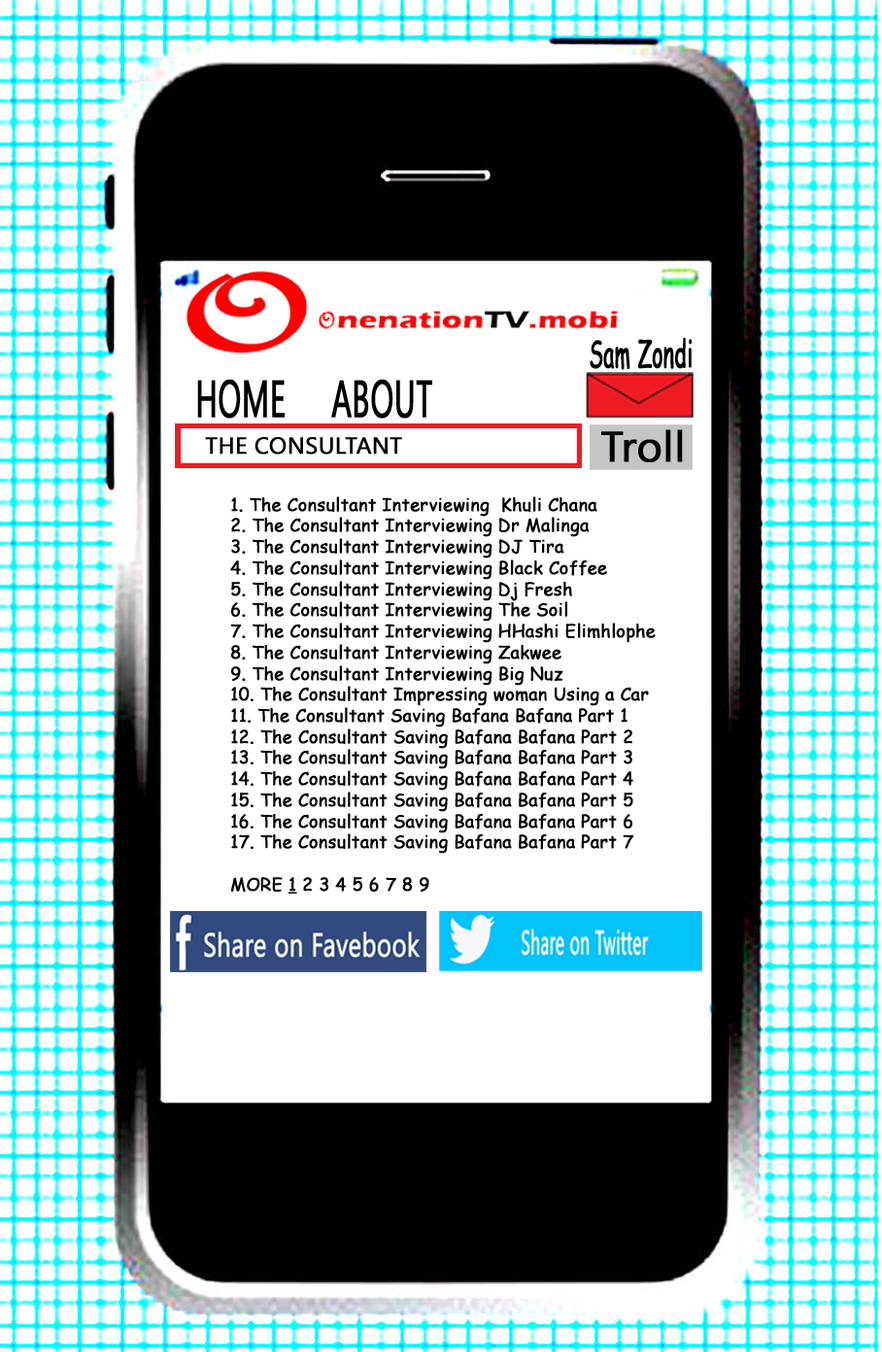
<style>
.page{position:relative;width:882px;height:1352px;background:#ffffff}
.page>*{position:absolute;margin:0}
.t1{font:37.7px "ComicSansMS";color:#020000;font-weight:bold;scale:0.54 1}
.t2{font:51.9px "KhmerUI";color:#000101;font-weight:bold;scale:0.59 1}
.t3{font:23.2px "KhmerUI";color:#000000;font-weight:bold}
.t4{font:42.6px "KhmerUI";color:#000303;font-weight:bold}
.t5{font:17.6px "ComicSansMS";color:#020000;font-weight:bold}
.t6{font:17.6px "ComicSansMS";color:#020000;font-weight:bold;text-decoration:underline}
</style>
<div class="page">
<p class="t1" style="left:590px;top:337px;width:102px;height:33px">Sam Zondi</p>
<p class="t2" style="left:197px;top:379px;width:235px;height:40px">HOME     ABOUT</p>
<p class="t3" style="left:205px;top:437px;width:197px;height:18px">THE CONSULTANT</p>
<p class="t4" style="left:601px;top:429px;width:82px;height:33px">Troll</p>
<p class="t5" style="left:230px;top:496px;width:426px;height:398px">1. The Consultant Interviewing  Khuli Chana<br>2. The Consultant Interviewing Dr Malinga<br>3. The Consultant Interviewing DJ Tira<br>4. The Consultant Interviewing Black Coffee<br>5. The Consultant Interviewing Dj Fresh<br>6. The Consultant Interviewing The Soil <br>7. The Consultant Interviewing HHashi Elimhlophe<br>8. The Consultant Interviewing Zakwee<br>9. The Consultant Interviewing Big Nuz<br>10. The Consultant Impressing woman Using a Car <br>11. The Consultant Saving Bafana Bafana Part 1<br>12. The Consultant Saving Bafana Bafana Part 2<br>13. The Consultant Saving Bafana Bafana Part 3<br>14. The Consultant Saving Bafana Bafana Part 4<br>15. The Consultant Saving Bafana Bafana Part 5<br>16. The Consultant Saving Bafana Bafana Part 6<br>17. The Consultant Saving Bafana Bafana Part 7<br><br>MORE <span class="t6">1</span> 2 3 4 5 6 7 8 9</p>
</div>
